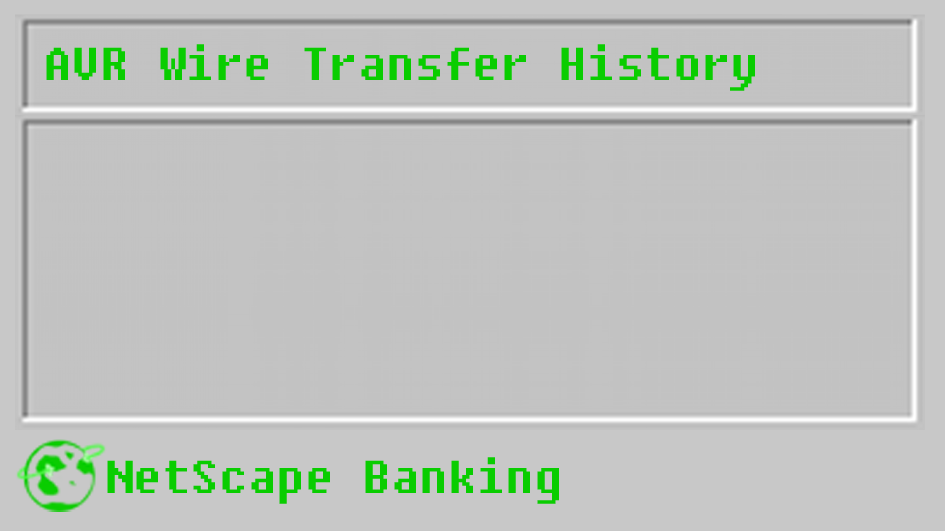
<style>
.page{position:relative;width:945px;height:531px;background:#c3c3c3}
.page>*{position:absolute;margin:0}
.t1{font:45.8px "Fixedsys";color:#0acd00}
</style>
<div class="page">
<p class="t1" style="left:46px;top:44px;width:709px;height:47px">AVR Wire Transfer History</p>
<p class="t1" style="left:107px;top:457px;width:452px;height:47px">NetScape Banking</p>
</div>
